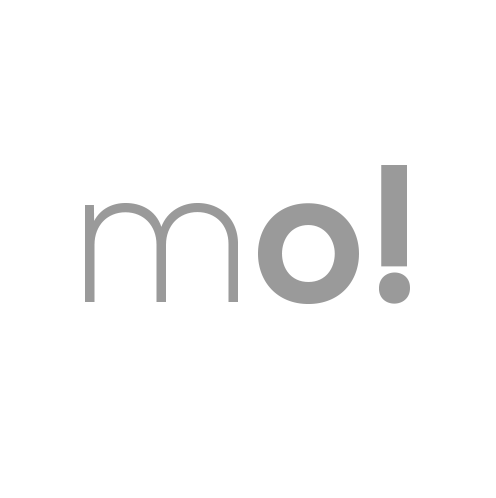
<style>
.page{position:relative;width:496px;height:498px;background:#ffffff}
.page>*{position:absolute;margin:0}
.t1{font:196.4px "NexaBold";color:#9a9a9a}
.t2{font:196.4px "NexaLight";color:#9a9a9a}
</style>
<div class="page">
<p class="t1" style="left:85px;top:165px;width:325px;height:139px">!<span class="t2">m</span>o</p>
</div>
